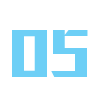
<style>
.page{position:relative;width:100px;height:100px;background:#ffffff}
.page>*{position:absolute;margin:0}
.t1{font:61px "MStiffHeiHK-UltraBold";color:#6dcff6}
</style>
<div class="page">
<p class="t1" style="left:12px;top:30px;width:76px;height:47px">05</p>
</div>
